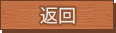
<style>
.page{position:relative;width:116px;height:33px}
.page>*{position:absolute;margin:0}
.t1{font:18px "KozGoPr6N-Regular";color:#f0e8e3}
</style>
<div class="page">
<p class="t1" style="left:40px;top:7px;width:35px;height:17px">返回</p>
</div>
